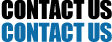
<style>
.page{position:relative;width:112px;height:42px;background:#ffffff}
.page>*{position:absolute;margin:0}
.t1{font:24px/11.4px "Impact";letter-spacing:-0.025em;color:#000000}
.t2{font:24px/11.4px "Impact";letter-spacing:-0.025em;color:#0c6ca7}
</style>
<div class="page">
<p class="t1" style="left:1px;top:0px;width:111px;height:42px;text-align:center">CONTACT US<br><br><span class="t2">CONTACT US</span></p>
</div>
